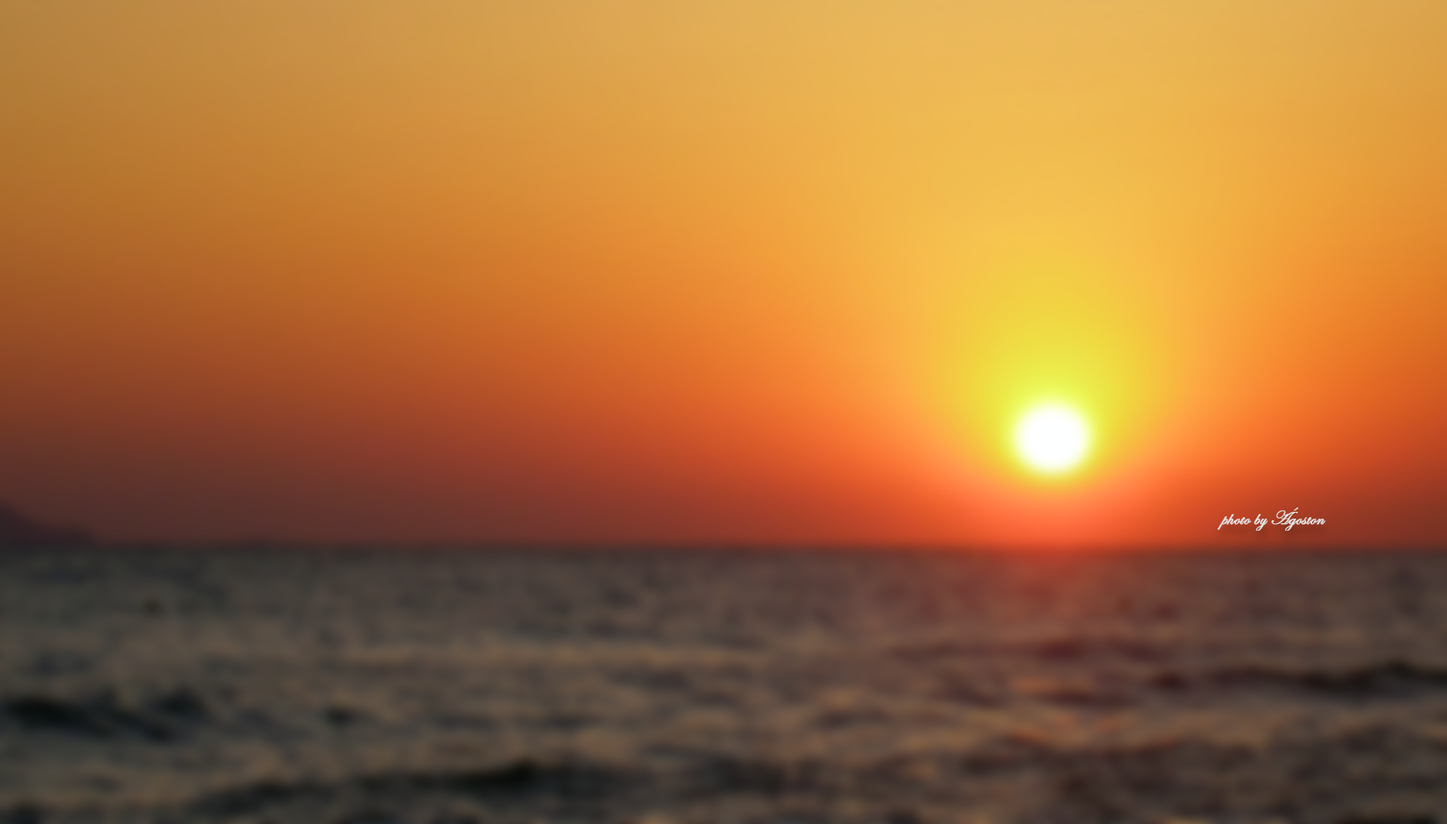
<style>
.page{position:relative;width:1447px;height:824px}
.page>*{position:absolute;margin:0}
.t1{font:19.6px "EdwardianScriptITC";color:#d7d7d7;font-weight:bold}
</style>
<div class="page">
<p class="t1" style="left:1217px;top:507px;width:109px;height:24px">photo by Ágoston</p>
</div>
